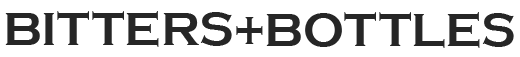
<style>
.page{position:relative;width:520px;height:57px;background:#ffffff}
.page>*{position:absolute;margin:0}
.t1{font:48px "CopperplateGothic-Bold";letter-spacing:0.2em;color:#262626;font-variant:small-caps}
</style>
<div class="page">
<p class="t1" style="left:5px;top:11px;width:227px;height:36px">BITTERS</p>
<p class="t1" style="left:236px;top:17px;width:27px;height:27px">+</p>
<p class="t1" style="left:266px;top:12px;width:248px;height:36px">BOTTLES</p>
</div>
